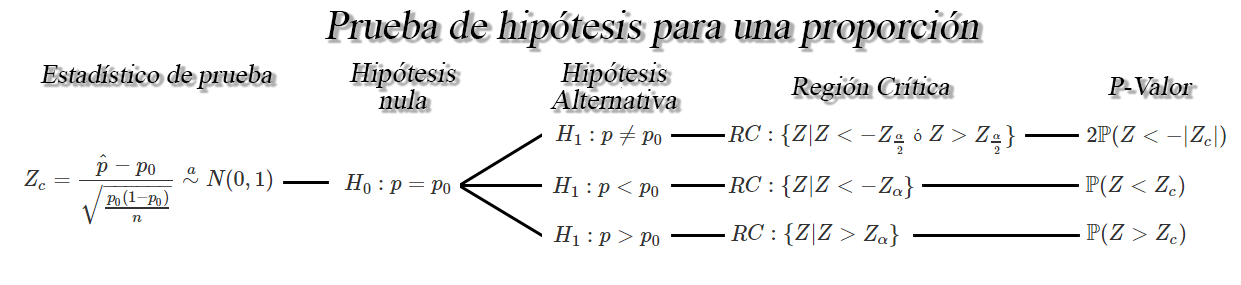
<style>
.page{position:relative;width:1241px;height:285px;background:#ffffff}
.page>*{position:absolute;margin:0}
.t1{font:30.5px "TimesNewRomanPSMT";color:#000000;font-style:italic}
.t2{font:20.4px "TimesNewRomanPSMT";color:#000000;font-style:italic}
.t3{font:21.1px/26.9px "TimesNewRomanPSMT";color:#000000;font-style:italic}
</style>
<div class="page">
<p class="t1" style="left:325px;top:10px;width:654px;height:38px">Prueba de hipótesis para una proporción</p>
<p class="t2" style="left:40px;top:64px;width:233px;height:25px">Estadístico de prueba</p>
<p class="t3" style="left:349px;top:62px;width:107px;height:47px;text-align:center">Hipótesis<br>nula</p>
<p class="t3" style="left:550px;top:62px;width:127px;height:47px;text-align:center">Hipótesis<br>Alternativa</p>
<p class="t2" style="left:791px;top:76px;width:159px;height:25px">Región Crítica</p>
<p class="t2" style="left:1108px;top:76px;width:85px;height:19px">P-Valor</p>
</div>
